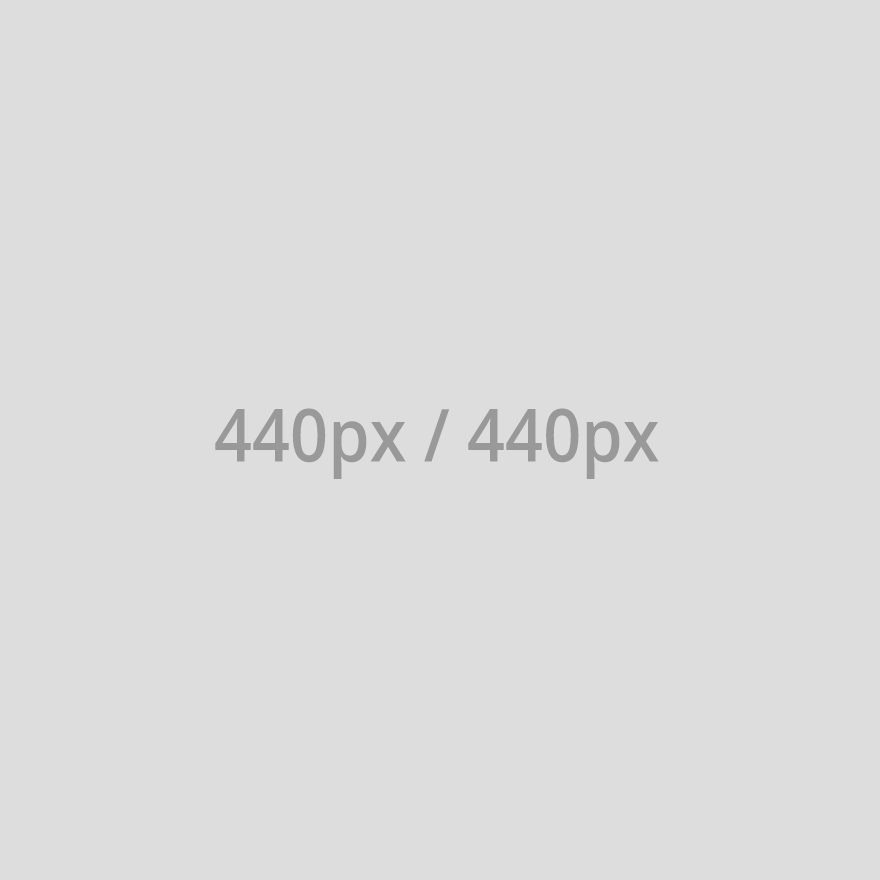
<style>
.page{position:relative;width:880px;height:880px;background:#dddddd}
.page>*{position:absolute;margin:0}
.t1{font:73.3px "OpenSans-Semibold";color:#999999;scale:0.91 1}
</style>
<div class="page">
<p class="t1" style="left:215px;top:408px;width:444px;height:71px">440px / 440px</p>
</div>
